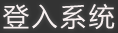
<style>
.page{position:relative;width:118px;height:33px}
.page>*{position:absolute;margin:0}
.t1{font:26px "MicrosoftYaHei";letter-spacing:0.1em;color:#f7efef}
</style>
<div class="page">
<p class="t1" style="left:3px;top:3px;width:112px;height:27px">登入系统</p>
</div>
